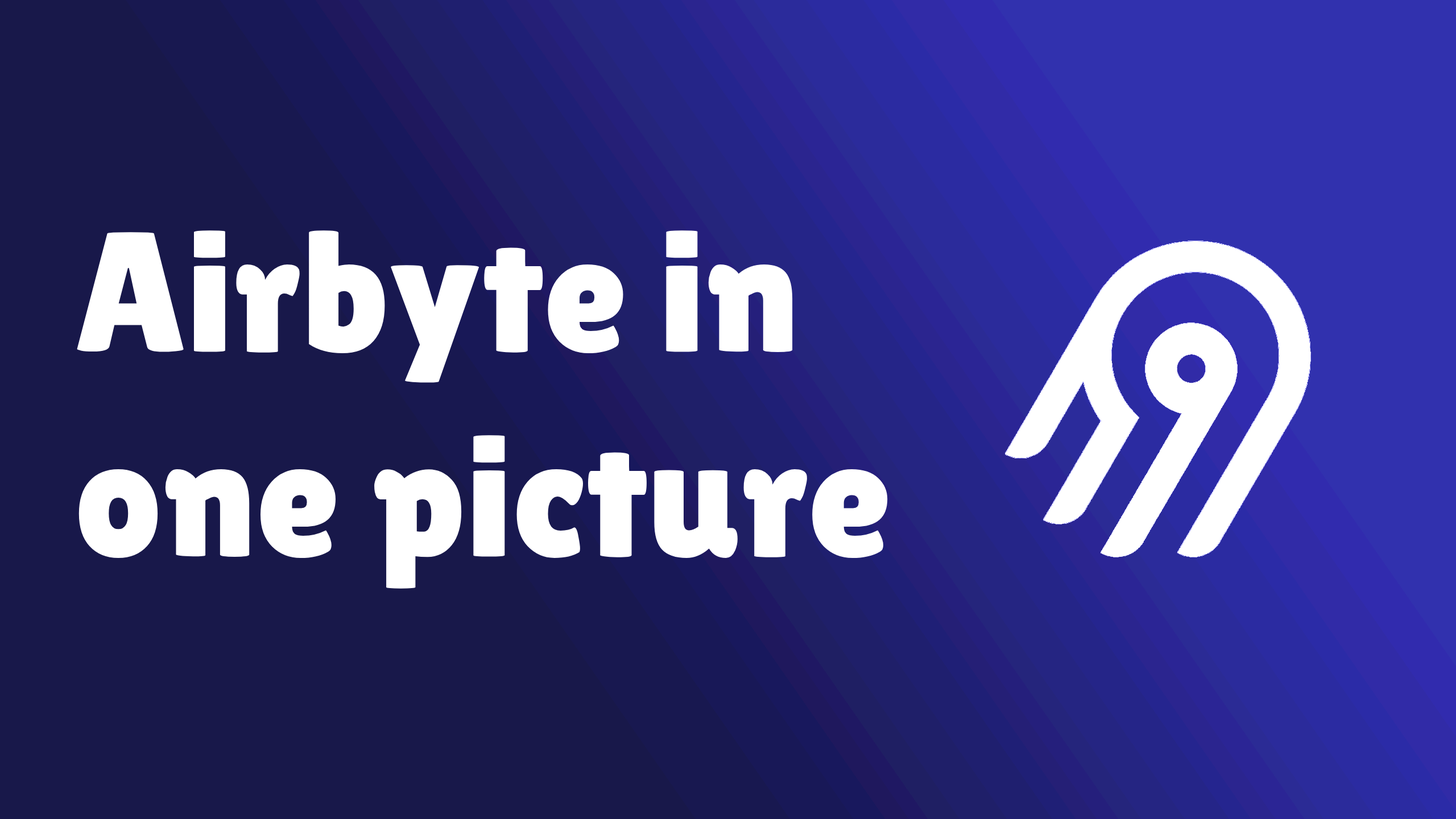
<style>
.page{position:relative;width:1456px;height:819px;background:#18184a}
.page>*{position:absolute;margin:0}
.t1{font:170.6px "LilitaOne";color:#ffffff}
</style>
<div class="page">
<p class="t1" style="left:77px;top:230px;width:811px;height:359px">Airbyte in one picture</p>
</div>
